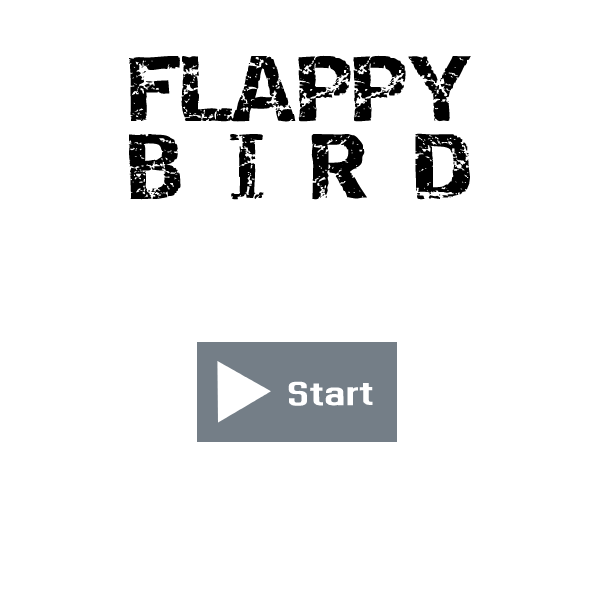
<style>
.page{position:relative;width:600px;height:600px;background:#ffffff}
.page>*{position:absolute;margin:0}
.t1{font:65px "Destroy";color:#000000}
.t2{font:50px "Dhurjati";color:#ffffff}
</style>
<div class="page">
<p class="t1" style="left:128px;top:55px;width:343px;height:145px">FLAPPY<br>B I R D</p>
<p class="t2" style="left:288px;top:381px;width:85px;height:25px;rotate:-1deg">Start</p>
</div>
